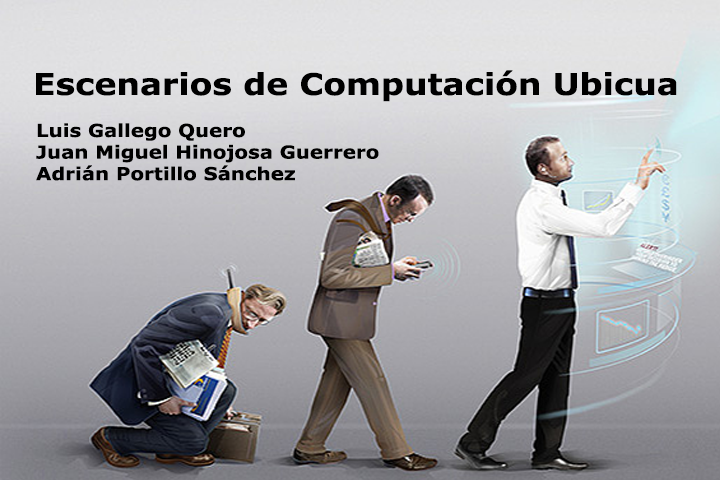
<style>
.page{position:relative;width:720px;height:480px}
.page>*{position:absolute;margin:0}
.t1{font:30px "Verdana-Bold";color:#000000;scale:1.1 1}
.t2{font:18px "Verdana-Bold";color:#000000;scale:1.1 1}
</style>
<div class="page">
<p class="t1" style="left:36px;top:70px;width:641px;height:32px">Escenarios de Computación Ubicua</p>
<p class="t2" style="left:36px;top:123px;width:343px;height:58px">Luis Gallego Quero<br>Juan Miguel Hinojosa Guerrero<br>Adrián Portillo Sánchez</p>
</div>
